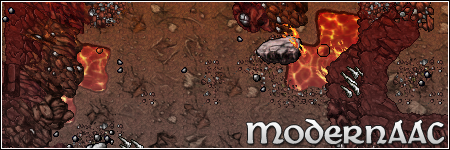
<style>
.page{position:relative;width:450px;height:150px}
.page>*{position:absolute;margin:0}
.t1{font:36px "Martel";color:#dcdcdc;font-weight:bold}
</style>
<div class="page">
<p class="t1" style="left:246px;top:119px;width:198px;height:25px">ModernAAC</p>
</div>
